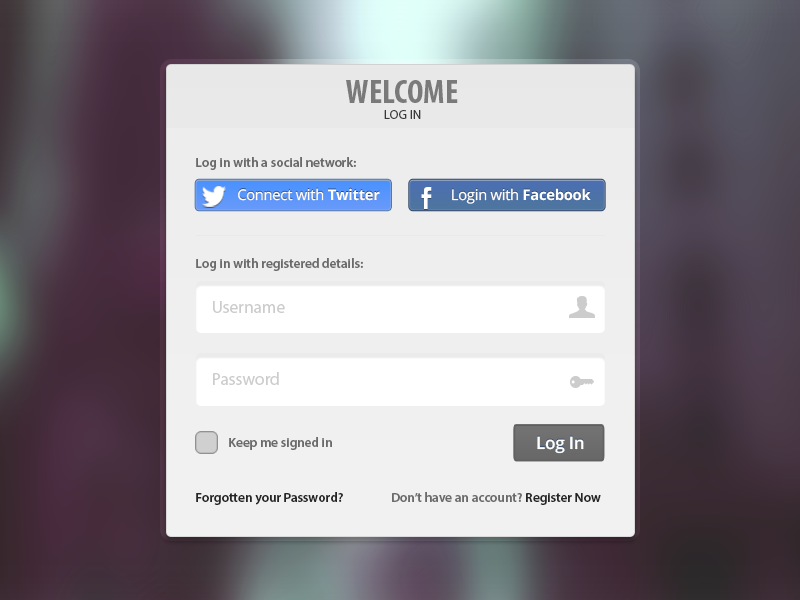
<style>
.page{position:relative;width:800px;height:600px}
.page>*{position:absolute;margin:0}
.t1{font:33.3px "MyriadPro-BoldCond";color:#7a7a7a}
.t2{font:13.1px "MyriadPro-Regular";color:#383838}
.t3{font:13.1px "MyriadPro-Semibold";color:#6a6a6a}
.t4{font:14.6px "OpenSans";letter-spacing:-0.015em;color:#ffffff}
.t5{font:14.6px "OpenSans-Bold";letter-spacing:-0.015em;color:#ffffff}
.t6{font:13.1px "MyriadPro-Semibold";color:#6b6b6b}
.t7{font:17.1px "MyriadPro-Regular";color:#cccccc}
.t8{font:17px "OpenSans-Semibold";letter-spacing:-0.015em;color:#ffffff}
.t9{font:13.1px "MyriadPro-Semibold";color:#262626}
</style>
<div class="page">
<p class="t1" style="left:346px;top:80px;width:112px;height:23px">WELCOME</p>
<p class="t2" style="left:384px;top:110px;width:37px;height:9px">LOG IN</p>
<p class="t3" style="left:196px;top:157px;width:160px;height:13px">Log in with a social network:</p>
<p class="t4" style="left:238px;top:188px;width:142px;height:13px">Connect with <span class="t5">Twitter</span></p>
<p class="t4" style="left:452px;top:188px;width:139px;height:16px">Login with <span class="t5">Facebook</span></p>
<p class="t6" style="left:196px;top:258px;width:167px;height:13px">Log in with registered details:</p>
<p class="t7" style="left:213px;top:301px;width:72px;height:12px">Username</p>
<p class="t7" style="left:213px;top:372px;width:66px;height:13px">Password</p>
<p class="t6" style="left:229px;top:437px;width:103px;height:13px">Keep me signed in</p>
<p class="t8" style="left:537px;top:436px;width:47px;height:18px">Log In</p>
<p class="t9" style="left:196px;top:492px;width:147px;height:13px">Forgotten your Password?</p>
<p class="t6" style="left:392px;top:492px;width:209px;height:13px">Don’t have an account? <span class="t9">Register Now</span></p>
</div>
